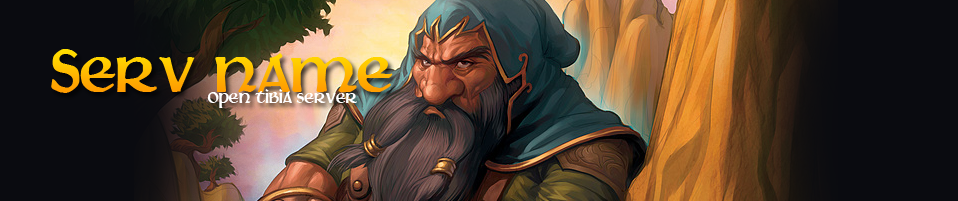
<style>
.page{position:relative;width:958px;height:201px;background:#0a0b10}
.page>*{position:absolute;margin:0}
.t1{font:72px "Martel"}
.t2{font:18px "Martel";color:#ffffff}
</style>
<div class="page">
<p class="t1" style="left:51px;top:49px;width:342px;height:44px">Serv name</p>
<p class="t2" style="left:207px;top:89px;width:150px;height:19px">OPEN TIBIA SERVER</p>
</div>
